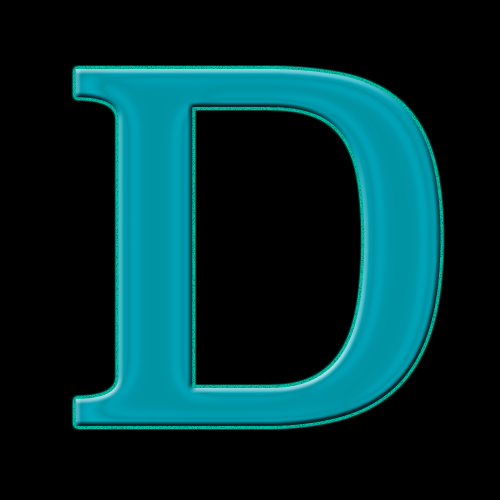
<style>
.page{position:relative;width:500px;height:500px;background:#000000}
.page>*{position:absolute;margin:0}
.t1{font:481px "Superclarendon-Regular";color:#0097a9}
</style>
<div class="page">
<p class="t1" style="left:75px;top:69px;width:366px;height:357px">D</p>
</div>
